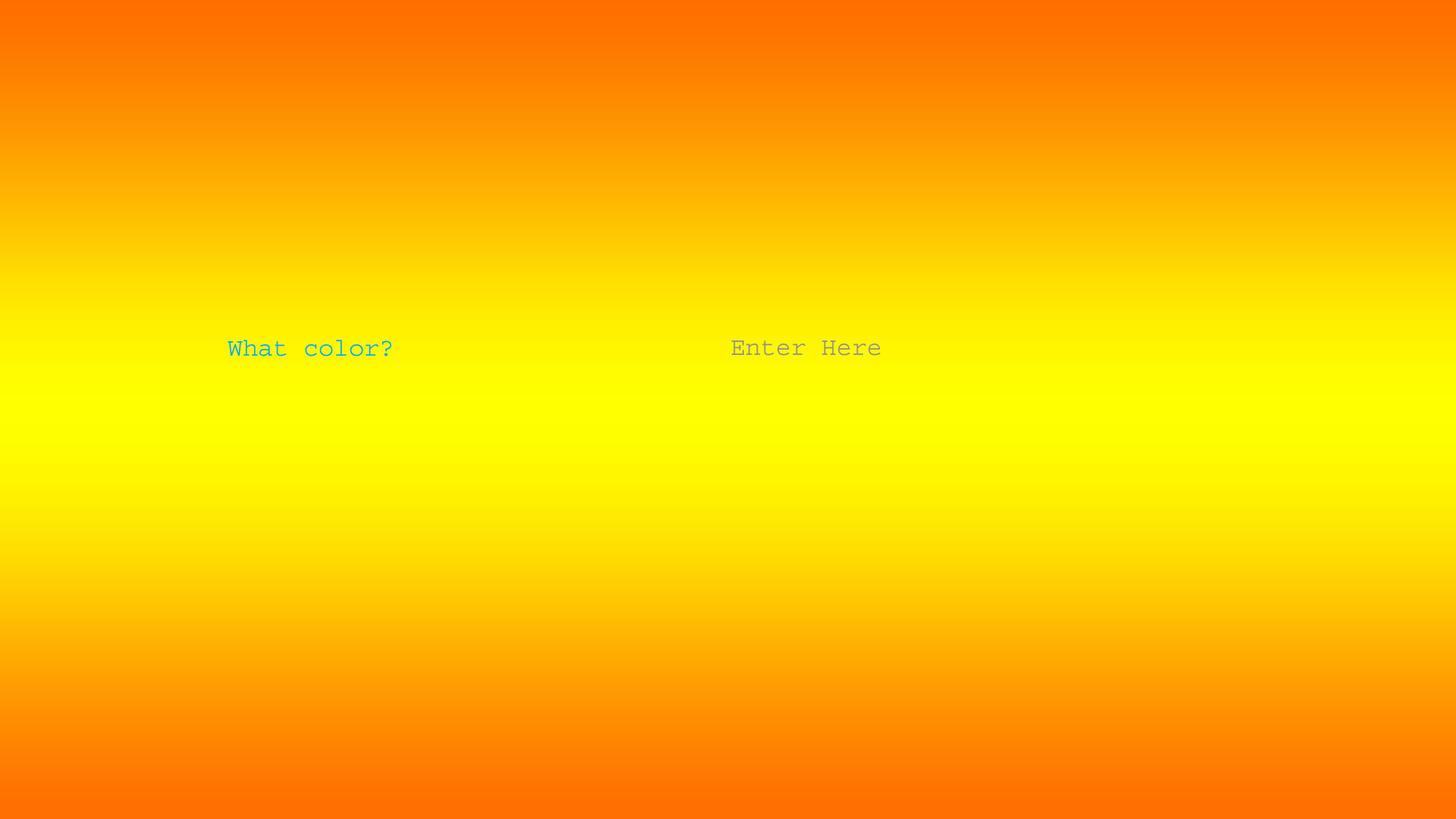
<style>
.page{position:relative;width:1456px;height:819px}
.page>*{position:absolute;margin:0}
.t1{font:25.3px "Courier";color:#00a8ff}
.t2{font:25.3px "Courier";color:#8f8e8e}
</style>
<div class="page">
<p class="t1" style="left:227px;top:340px;width:164px;height:16px">What color?</p>
<p class="t2" style="left:731px;top:340px;width:149px;height:16px">Enter Here</p>
</div>
